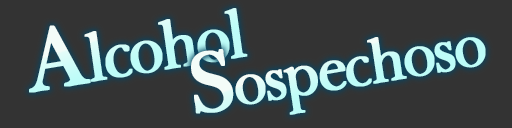
<style>
.page{position:relative;width:512px;height:128px;background:#333333}
.page>*{position:absolute;margin:0}
.t1{font:78.3px "BaskervilleLight";letter-spacing:-0.06em;color:#c2fcf8;font-weight:bold;scale:0.93 1}
.t2{font:102.7px "BaskervilleLight";letter-spacing:-0.06em;color:#c2fcf8;font-weight:bold;scale:0.93 1}
.t3{font:72px "BaskervilleLight";letter-spacing:-0.06em;color:#cefcf8;font-weight:bold;scale:0.96 1}
.t4{font:100px "BaskervilleLight";letter-spacing:-0.06em;color:#cefcf8;font-weight:bold;scale:0.96 1}
</style>
<div class="page">
<p class="t1" style="left:29px;top:8px;width:219px;height:85px;rotate:-10deg"><span class="t2">A</span>lcohol</p>
<p class="t3" style="left:191px;top:37px;width:295px;height:78px;rotate:-10deg"><span class="t4">S</span>ospechoso</p>
</div>
